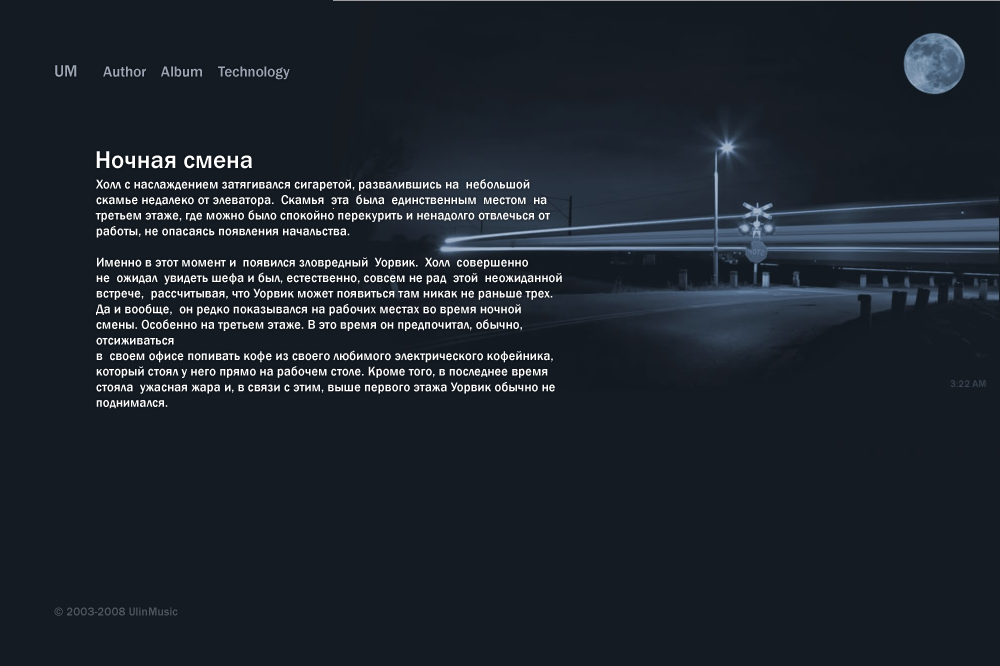
<style>
.page{position:relative;width:1000px;height:666px;background:#141b23}
.page>*{position:absolute;margin:0}
.t1{font:15px "FranklinGothic-Medium";color:#b1bbcb}
.t2{font:17px "FranklinGothic-Medium";color:#b1bbcb}
.t3{font:25px "FranklinGothic-Medium";color:#ffffff}
.t4{font:13px/15.6px "FranklinGothic-Medium";color:#ffffff}
.t5{font:12px "FranklinGothic-Medium";color:#54595f}
</style>
<div class="page">
<p class="t1" style="left:55px;top:65px;width:235px;height:15px;opacity:0.87"><span class="t2">UM      </span>Author    Album    Technology</p>
<p class="t3" style="left:96px;top:151px;width:156px;height:18px">Ночная смена</p>
<p class="t4" style="left:95px;top:179px;width:467px;height:230px">Холл с наслаждением затягивался сигаретой, развалившись на  небольшой <br>скамье недалеко от элеватора.  Скамья  эта  была  единственным  местом  на <br>третьем этаже, где можно было спокойно перекурить и ненадолго отвлечься от <br>работы, не опасаясь появления начальства. <br><br>Именно в этот момент и  появился зловредный  Уорвик.  Холл  совершенно  <br>не  ожидал  увидеть шефа и был, естественно, совсем не рад  этой  неожиданной  <br>встрече,  рассчитывая, что Уорвик может появиться там никак не раньше трех. <br>Да и вообще,  он редко показывался на рабочих местах во время ночной <br>смены. Особенно на третьем этаже. В это время он предпочитал, обычно, <br>отсиживаться <br>в  своем офисе попивать кофе из своего любимого электрического кофейника, <br>который стоял у него прямо на рабочем столе. Кроме того, в последнее время <br>стояла  ужасная жара и, в связи с этим, выше первого этажа Уорвик обычно не <br>поднимался.</p>
<p class="t5" style="left:54px;top:607px;width:124px;height:9px">© 2003-2008 UlinMusic</p>
</div>
